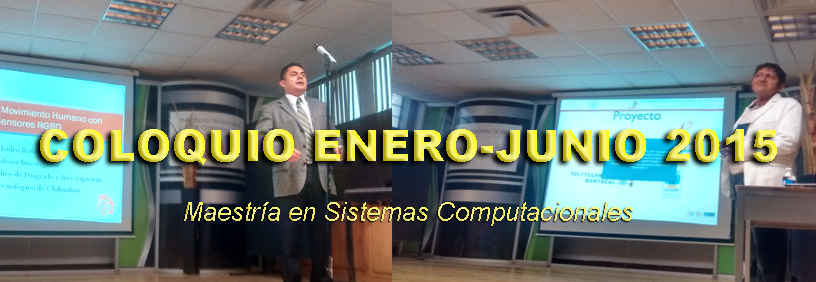
<style>
.page{position:relative;width:816px;height:282px}
.page>*{position:absolute;margin:0}
.t1{font:43.5px "Arial-Black"}
.t2{font:26.2px "Arial-ItalicMT"}
</style>
<div class="page">
<p class="t1" style="left:40px;top:129px;width:737px;height:36px">COLOQUIO ENERO-JUNIO 2015</p>
<p class="t2" style="left:184px;top:202px;width:449px;height:24px">Maestría en Sistemas Computacionales</p>
</div>
